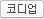
<style>
.page{position:relative;width:44px;height:19px}
.page>*{position:absolute;margin:0}
.t1{font:12px "morris9";color:#4f4f4f}
</style>
<div class="page">
<p class="t1" style="left:7px;top:4px;width:29px;height:10px">코디업</p>
</div>
